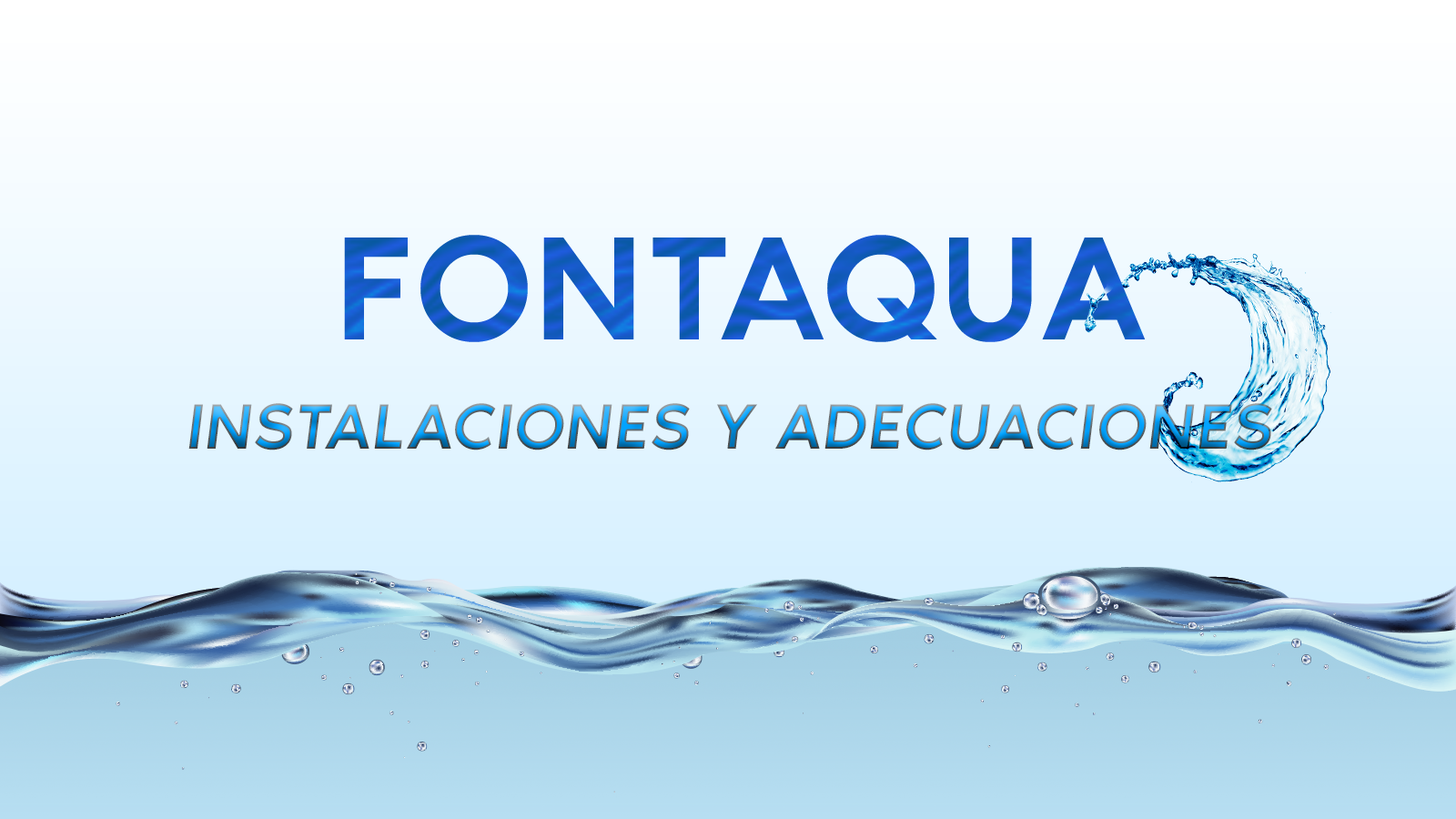
<style>
.page{position:relative;width:1456px;height:819px}
.page>*{position:absolute;margin:0}
.t1{font:65.7px "NoirPro-MediumItalic";letter-spacing:0.025em;text-transform:uppercase}
</style>
<div class="page">
<p class="t1" style="left:188px;top:403px;width:1084px;height:47px">instalaciones y adecuaciones</p>
</div>
